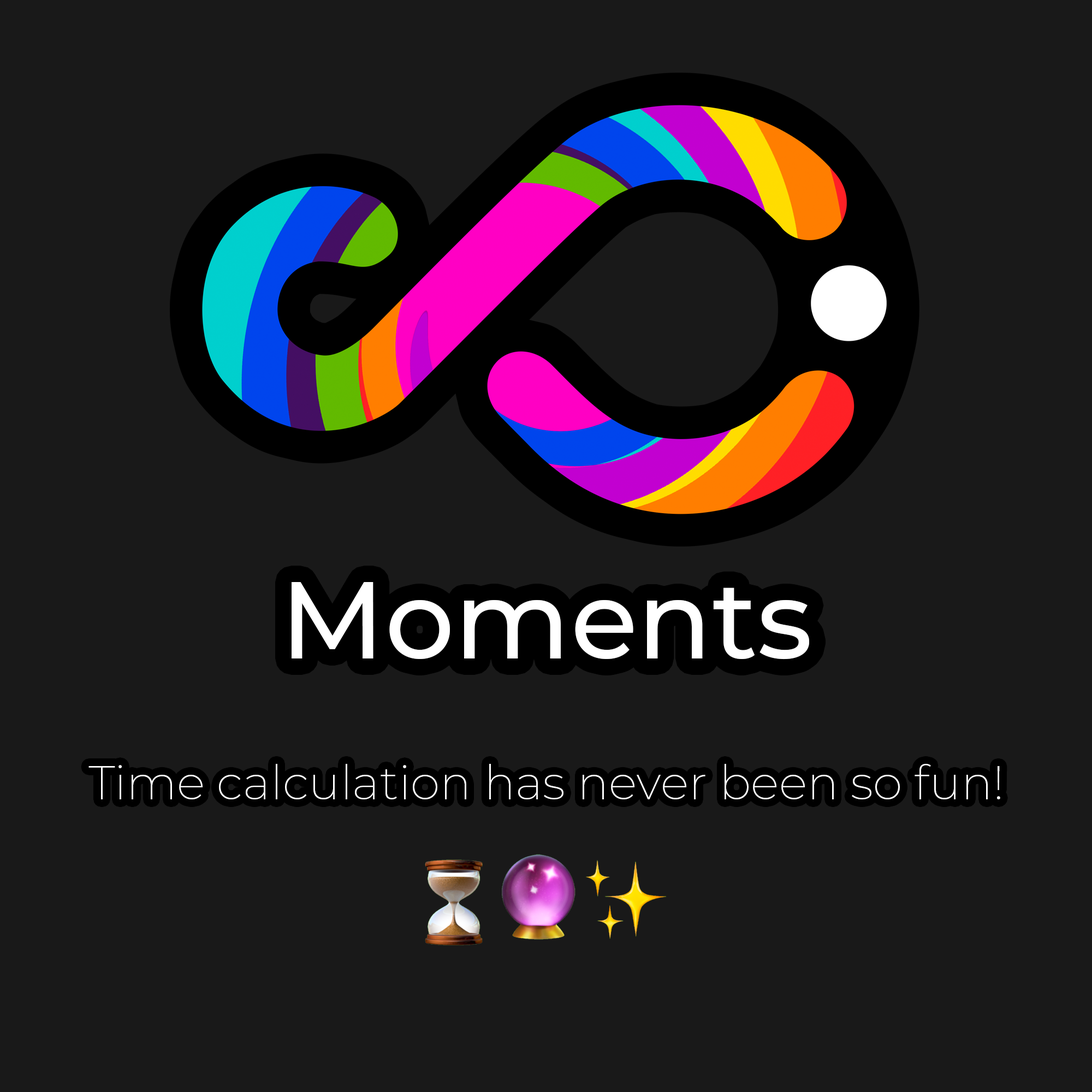
<style>
.page{position:relative;width:1092px;height:1092px;background:#191919}
.page>*{position:absolute;margin:0}
.t1{font:109.5px "Montserrat-Medium";color:#ffffff}
.t2{font:47.5px "Montserrat-ExtraLight";color:#ffffff}
</style>
<div class="page">
<p class="t1" style="left:292px;top:582px;width:517px;height:78px">Moments</p>
<p class="t2" style="left:88px;top:764px;width:912px;height:35px">Time calculation has never been so fun!</p>
</div>
